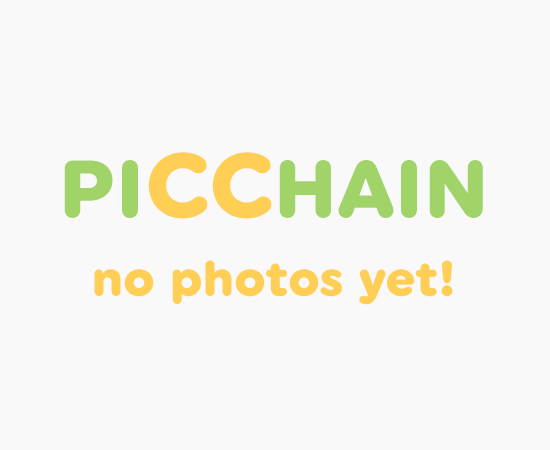
<style>
.page{position:relative;width:550px;height:450px;background:#f9f9f9}
.page>*{position:absolute;margin:0}
.t1{font:81.6px "UniformRnd-Black";letter-spacing:0.01em;color:#a0d468}
.t2{font:91.7px "UniformRnd-Black";letter-spacing:0.01em;color:#ffce54}
.t3{font:50px "UniformRnd-Black";letter-spacing:0.01em;color:#ffce54}
</style>
<div class="page">
<p class="t1" style="left:64px;top:152px;width:419px;height:67px">PI<span class="t2">CC</span>HAIN</p>
<p class="t3" style="left:94px;top:260px;width:359px;height:45px">no photos yet!</p>
</div>
